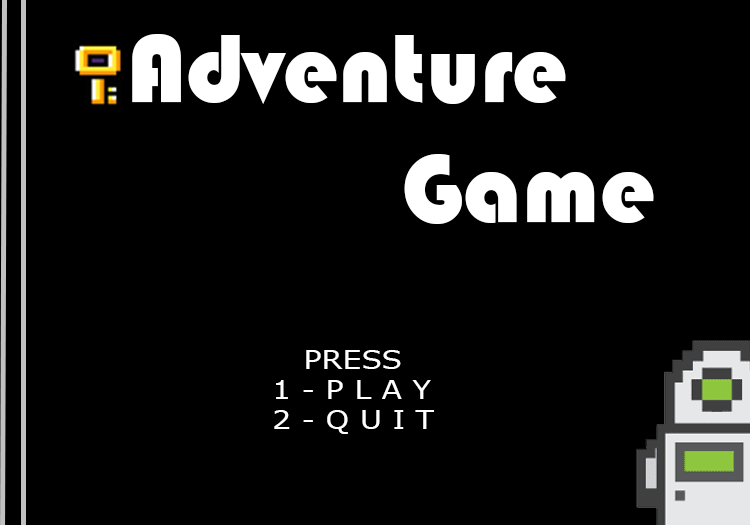
<style>
.page{position:relative;width:750px;height:525px;background:#000000}
.page>*{position:absolute;margin:0}
.t1{font:100px "Bauhaus93";color:#ffffff}
.t2{font:24.8px "MSReferenceSansSerif";color:#ffffff;scale:1.21 1}
</style>
<div class="page">
<p class="t1" style="left:132px;top:34px;width:522px;height:190px">Adventure<br>           Game</p>
<p class="t2" style="left:274px;top:350px;width:160px;height:84px">PRESS<br>1 - P L A Y<br>2 - Q U I T</p>
</div>
